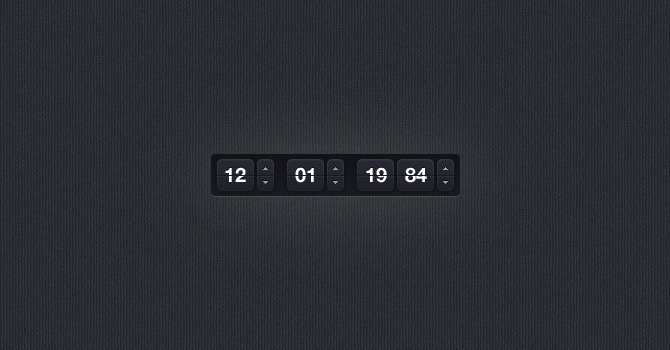
<style>
.page{position:relative;width:670px;height:350px}
.page>*{position:absolute;margin:0}
.t1{font:20px "HelveticaNeue-Bold";color:#ffffff}
</style>
<div class="page">
<p class="t1" style="left:225px;top:167px;width:21px;height:15px">12</p>
<p class="t1" style="left:295px;top:167px;width:19px;height:16px">01</p>
<p class="t1" style="left:366px;top:167px;width:21px;height:16px">19</p>
<p class="t1" style="left:405px;top:167px;width:22px;height:16px">84</p>
</div>
